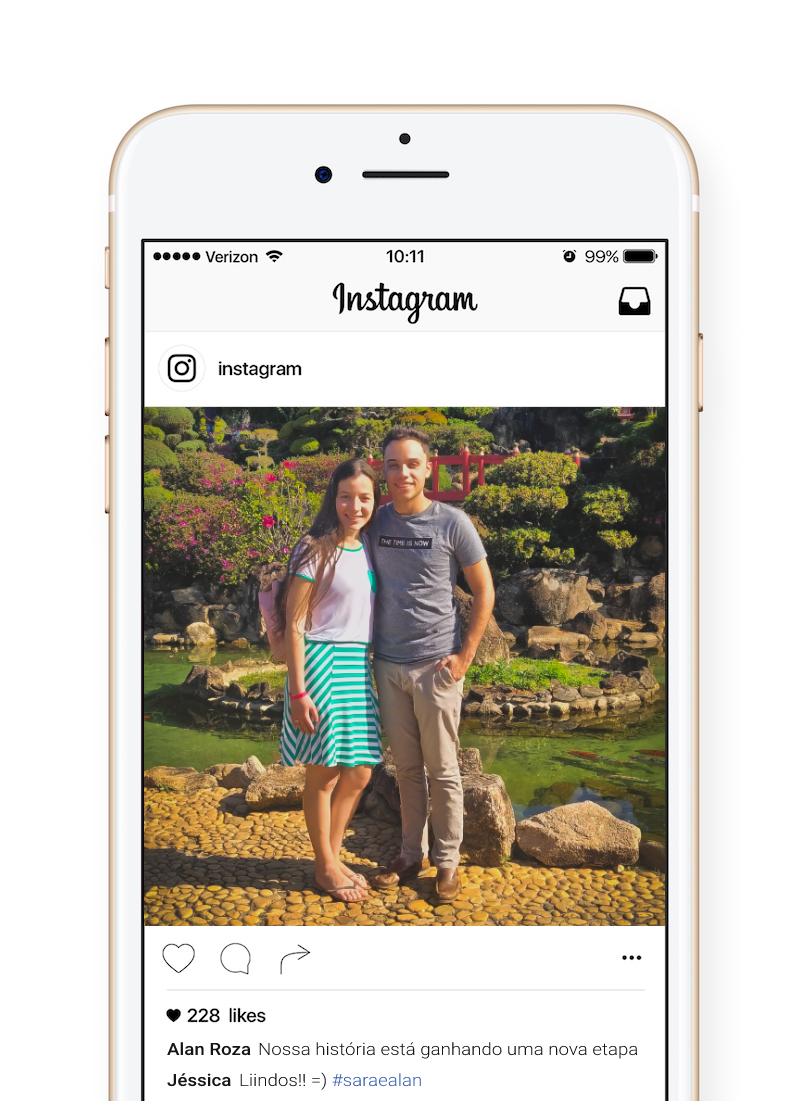
<style>
.page{position:relative;width:800px;height:1101px;background:#ffffff}
.page>*{position:absolute;margin:0}
.t1{font:17px "Roboto-Medium";color:#151515;scale:1.1 1}
.t2{font:17px "Roboto-Light";color:#151515;scale:1.1 1}
.t3{font:17px "Roboto-Light";color:#345da9;scale:1.1 1}
</style>
<div class="page">
<p class="t1" style="left:167px;top:1042px;width:84px;height:14px">Alan Roza</p>
<p class="t2" style="left:259px;top:1042px;width:379px;height:17px">Nossa história está ganhando uma nova etapa</p>
<p class="t1" style="left:167px;top:1073px;width:64px;height:14px">Jéssica</p>
<p class="t2" style="left:240px;top:1072px;width:181px;height:18px">Liindos!! =) <span class="t3">#saraealan</span></p>
</div>
